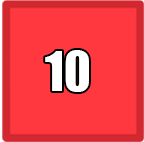
<style>
.page{position:relative;width:144px;height:142px;background:#ff3840}
.page>*{position:absolute;margin:0}
.t1{font:50px "Impact";color:#ffffff}
</style>
<div class="page">
<p class="t1" style="left:45px;top:50px;width:44px;height:42px">10</p>
</div>
